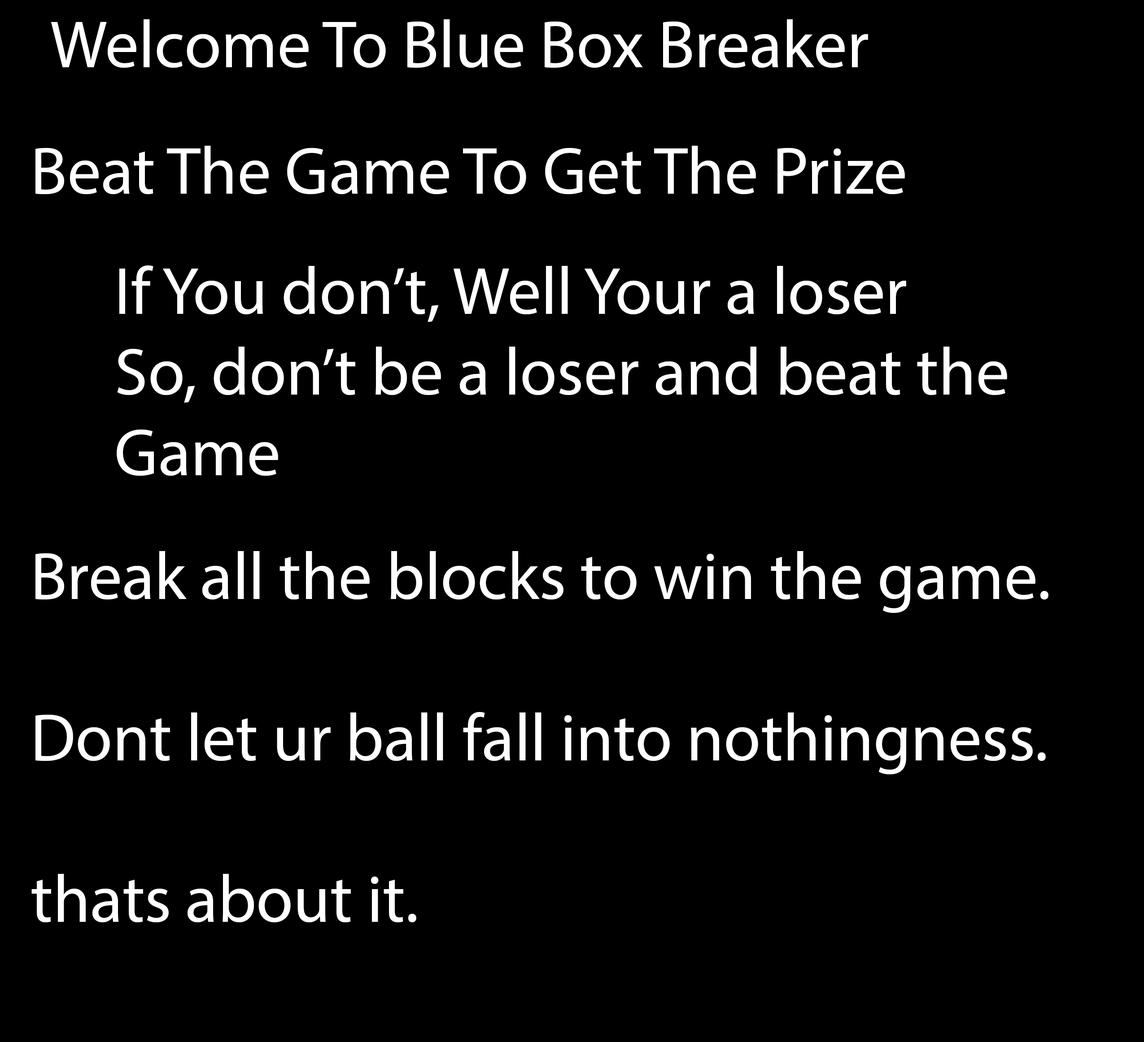
<style>
.page{position:relative;width:1144px;height:1042px;background:#000000}
.page>*{position:absolute;margin:0}
.t1{font:67.3px "MyriadPro-Regular";color:#ffffff}
</style>
<div class="page">
<p class="t1" style="left:51px;top:19px;width:817px;height:49px">Welcome To Blue Box Breaker</p>
<p class="t1" style="left:35px;top:146px;width:870px;height:49px">Beat The Game To Get The Prize</p>
<p class="t1" style="left:117px;top:265px;width:890px;height:211px">If You don’t, Well Your a loser<br>So, don’t be a loser and beat the <br>Game</p>
<p class="t1" style="left:31px;top:551px;width:1017px;height:372px">Break all the blocks to win the game.<br><br>Dont let ur ball fall into nothingness.<br><br>thats about it.</p>
</div>
